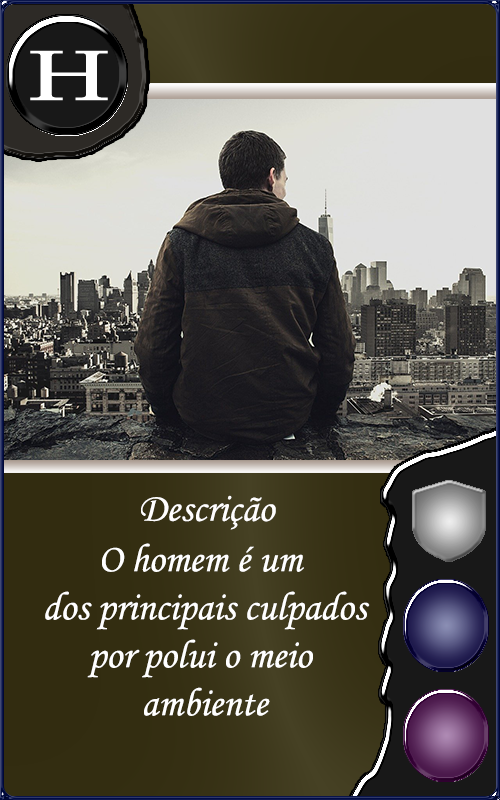
<style>
.page{position:relative;width:500px;height:800px}
.page>*{position:absolute;margin:0}
.t1{font:40px "MonotypeCorsiva";color:#fffefe}
.t2{font:40px "MonotypeCorsiva";color:#ffffff}
</style>
<div class="page">
<p class="t1" style="left:141px;top:495px;width:135px;height:35px">Descrição</p>
<p class="t2" style="left:45px;top:543px;width:325px;height:173px;text-align:center">O homem é um <br>dos principais culpados<br>por polui o meio <br>ambiente</p>
</div>
